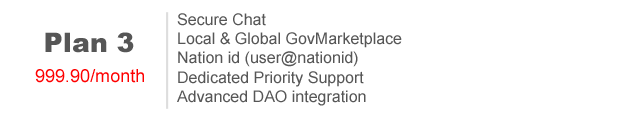
<style>
.page{position:relative;width:620px;height:120px;background:#ffffff}
.page>*{position:absolute;margin:0}
.t1{font:16px "ArialMT";color:#565656}
.t2{font:26.8px "Arial-Black";color:#565656}
.t3{font:18px "ArialMT";color:#fe0000}
</style>
<div class="page">
<p class="t1" style="left:177px;top:13px;width:225px;height:93px">Secure Chat<br>Local &amp; Global GovMarketplace<br>Nation id (user@nationid)<br>Dedicated Priority Support<br>Advanced DAO integration</p>
<p class="t2" style="left:45px;top:32px;width:89px;height:21px">Plan 3</p>
<p class="t3" style="left:35px;top:69px;width:109px;height:14px">999.90/month</p>
</div>
